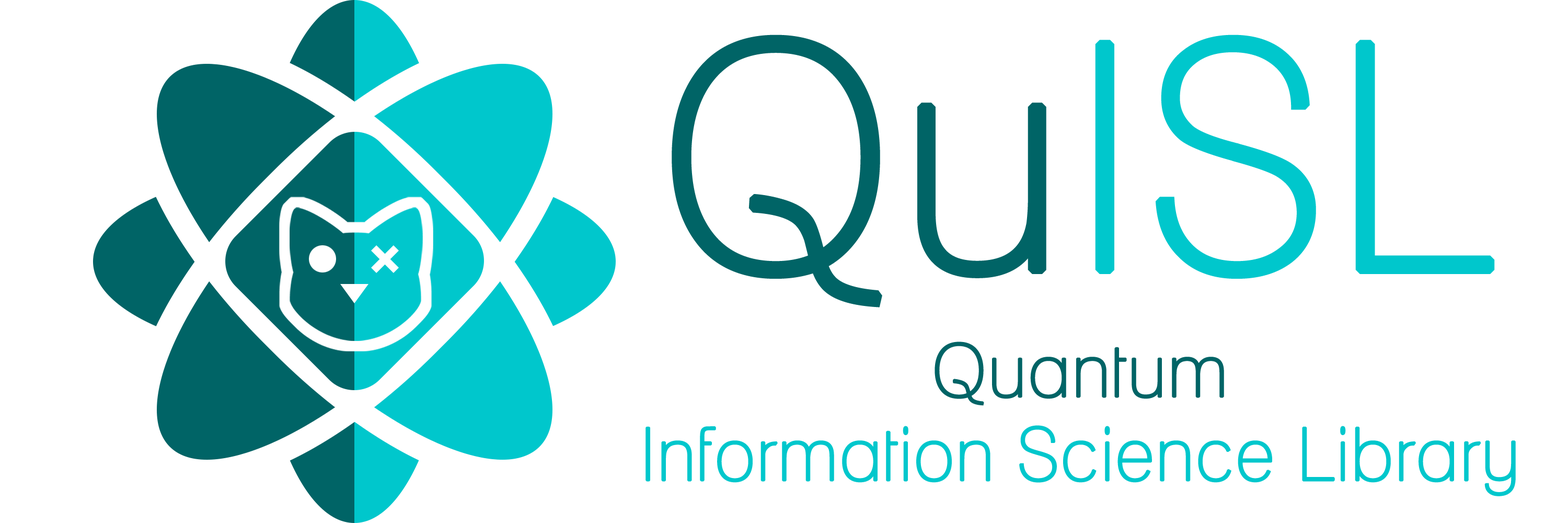
<style>
.page{position:relative;width:1568px;height:523px;background:#ffffff}
.page>*{position:absolute;margin:0}
.t1{font:313.6px "Lane-Narrow";color:#00c7cc;font-weight:bold}
.t2{font:313.6px "Lane-Narrow";color:#006466;font-weight:bold}
.t3{font:73.2px/83.6px "Lane-Narrow";color:#00c7cc;font-weight:bold}
.t4{font:73.2px/83.6px "Lane-Narrow";color:#006466;font-weight:bold}
</style>
<div class="page">
<p class="t1" style="left:672px;top:34px;width:823px;height:273px"><span class="t2">Qu</span>ISL</p>
<p class="t3" style="left:645px;top:341px;width:871px;height:155px;text-align:center"><span class="t4">Quantum<br></span>Information Science Library</p>
</div>
